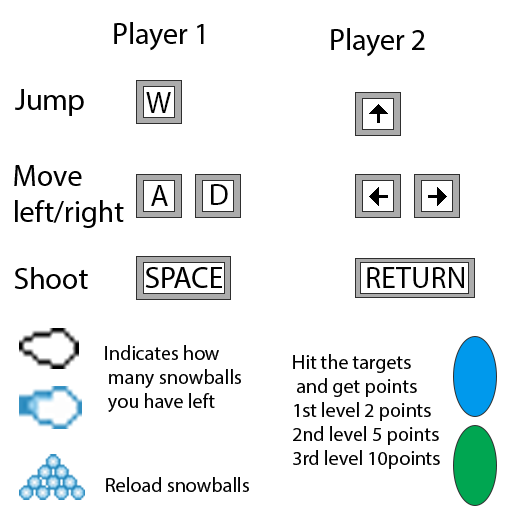
<style>
.page{position:relative;width:512px;height:512px;background:#ffffff}
.page>*{position:absolute;margin:0}
.t1{font:30px "MyriadPro-Regular";color:#000000}
.t2{font:20px "MyriadPro-Regular";color:#000000}
</style>
<div class="page">
<p class="t1" style="left:331px;top:28px;width:94px;height:29px">Player 2</p>
<p class="t1" style="left:15px;top:89px;width:69px;height:27px">Jump</p>
<p class="t1" style="left:146px;top:92px;width:25px;height:21px">W</p>
<p class="t1" style="left:14px;top:165px;width:110px;height:63px">Move<br>left/right</p>
<p class="t1" style="left:151px;top:185px;width:17px;height:21px">A</p>
<p class="t1" style="left:211px;top:184px;width:17px;height:21px">D</p>
<p class="t1" style="left:14px;top:267px;width:74px;height:22px">Shoot</p>
<p class="t1" style="left:367px;top:267px;width:97px;height:21px">RETURN</p>
<p class="t2" style="left:105px;top:345px;width:136px;height:67px">Indicates how<br> many snowballs<br> you have left</p>
<p class="t2" style="left:293px;top:354px;width:147px;height:115px">Hit the targets<br> and get points<br>1st level 2 points<br>2nd level 5 points<br>3rd level 10points</p>
<p class="t2" style="left:106px;top:477px;width:143px;height:15px">Reload snowballs</p>
</div>
